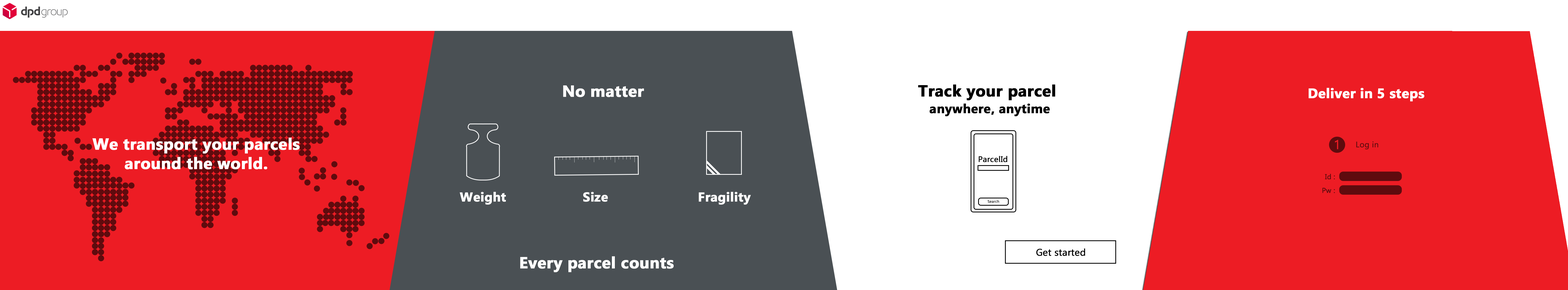
<style>
.page{position:relative;width:1568px;height:290px;background:#ed1c24}
.page>*{position:absolute;margin:0}
.t1{font:16.1px "Ebrima-Bold";color:#ffffff;font-weight:bold}
.t2{font:16.1px "Ebrima-Bold";color:#000000;font-weight:bold}
.t3{font:13.7px "Ebrima-Bold";color:#ffffff;font-weight:bold}
.t4{font:12.9px "Ebrima-Bold";color:#000000;font-weight:bold}
.t5{font:12.9px "Ebrima";color:#ed1c24;font-weight:bold}
.t6{font:8.1px "Ebrima";color:#5f0b0e;font-weight:bold}
.t7{font:8.1px "Ebrima";color:#000000;font-weight:bold}
.t8{font:7.1px "Ebrima";color:#5f0b0e;font-weight:bold}
.t9{font:12.9px "Ebrima-Bold";color:#ffffff;font-weight:bold}
.t10{font:3.8px "Ebrima";color:#000000;font-weight:bold}
.t11{font:9.7px "Ebrima";color:#000000;font-weight:bold}
</style>
<div class="page">
<p class="t1" style="left:563px;top:85px;width:81px;height:12px">No matter</p>
<p class="t2" style="left:918px;top:84px;width:137px;height:16px">Track your parcel</p>
<p class="t3" style="left:1309px;top:88px;width:115px;height:13px">Deliver in 5 steps</p>
<p class="t4" style="left:930px;top:103px;width:120px;height:13px">anywhere, anytime</p>
<p class="t1" style="left:92px;top:137px;width:208px;height:32px;text-align:center">We transport your parcels around the world.</p>
<p class="t5" style="left:1335px;top:140px;width:3px;height:9px">1</p>
<p class="t6" style="left:1356px;top:141px;width:22px;height:8px">Log in</p>
<p class="t7" style="left:979px;top:156px;width:28px;height:6px">ParcelId</p>
<p class="t8" style="left:1325px;top:174px;width:10px;height:5px">Id :</p>
<p class="t9" style="left:460px;top:192px;width:46px;height:13px">Weight</p>
<p class="t9" style="left:583px;top:192px;width:25px;height:10px">Size</p>
<p class="t9" style="left:699px;top:192px;width:52px;height:13px">Fragility</p>
<p class="t8" style="left:1322px;top:188px;width:13px;height:5px">Pw :</p>
<p class="t10" style="left:988px;top:200px;width:11px;height:3px">Search</p>
<p class="t1" style="left:520px;top:256px;width:154px;height:16px">Every parcel counts</p>
<p class="t11" style="left:1036px;top:248px;width:49px;height:8px">Get started</p>
</div>
